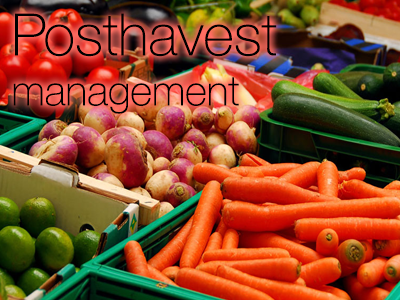
<style>
.page{position:relative;width:400px;height:300px}
.page>*{position:absolute;margin:0}
.t1{font:58.3px "HelveticaNeue-Thin";color:#000000}
.t2{font:41.7px "HelveticaNeue-Thin";color:#000000}
</style>
<div class="page">
<p class="t1" style="left:13px;top:13px;width:264px;height:101px">Posthavest<br><span class="t2">management</span></p>
</div>
